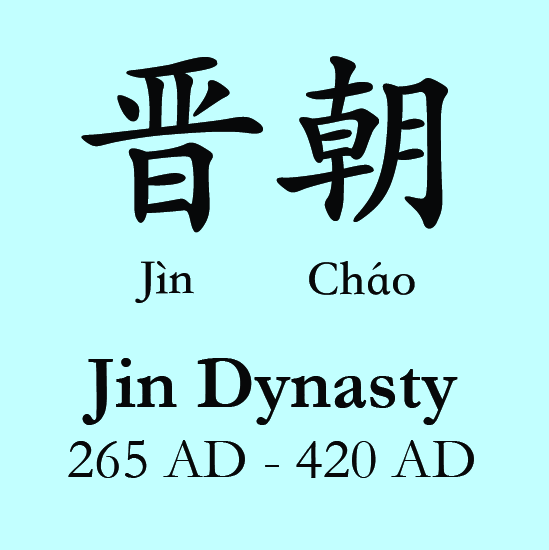
<style>
.page{position:relative;width:549px;height:550px;background:#c2ffff}
.page>*{position:absolute;margin:0}
.t1{font:200px "STKaiti-SC-Bold";color:#070809}
.t2{font:50px "STKaiti-SC-Bold";color:#070809}
.t3{font:58.3px "Garamond";color:#070809}
.t4{font:75px "Garamond-Bold";color:#070809}
</style>
<div class="page">
<p class="t1" style="left:81px;top:56px;width:367px;height:177px">晋朝</p>
<p class="t2" style="left:135px;top:261px;width:59px;height:42px">Jìn</p>
<p class="t2" style="left:309px;top:261px;width:106px;height:34px">Cháo</p>
<p class="t3" style="left:68px;top:358px;width:406px;height:120px;text-align:center"><span class="t4">Jin Dynasty<br></span>265 AD - 420 AD</p>
</div>
